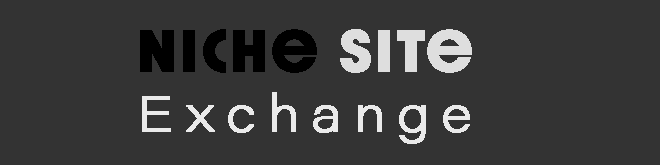
<style>
.page{position:relative;width:660px;height:165px;background:#333333}
.page>*{position:absolute;margin:0}
.t1{font:50px "AcuminProWide-ExtraLight";letter-spacing:0.23em;color:#eaeaea;font-weight:bold}
.t2{font:50px "DazzleUnicase-Bold";letter-spacing:0.06em;color:#000000;font-weight:bold}
.t3{font:50px "DazzleUnicase-Bold";letter-spacing:0.06em;color:#dedede;font-weight:bold}
</style>
<div class="page">
<p class="t1" style="left:140px;top:29px;width:332px;height:115px"><span class="t2">Niche </span><span class="t3">Site <br></span>Exchange</p>
</div>
